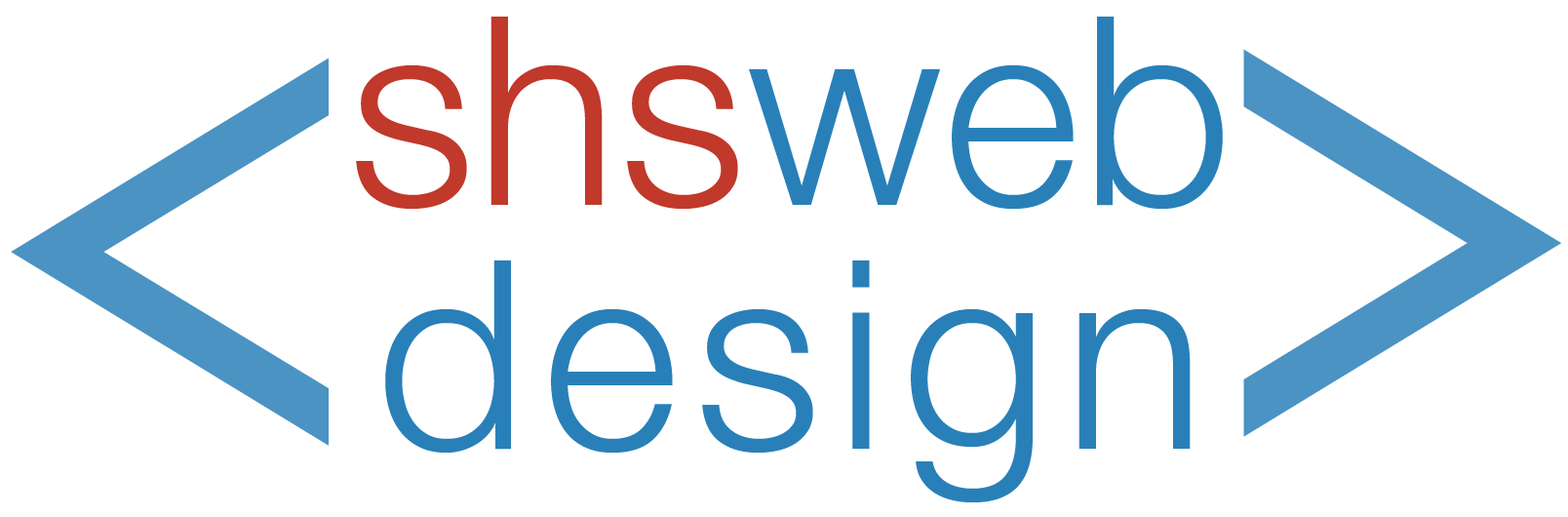
<style>
.page{position:relative;width:1568px;height:517px;background:#ffffff}
.page>*{position:absolute;margin:0}
.t1{font:263.3px/243.8px "HelveticaNeue-Light";letter-spacing:0.06em;color:#2980b9}
.t2{font:263.3px/243.8px "HelveticaNeue-Light";letter-spacing:0.005em;color:#c0392b}
.t3{font:263.3px/243.8px "HelveticaNeue-Light";letter-spacing:0.005em;color:#2980b9}
.t4{font:1263.8px "GeosansLight";letter-spacing:0.12em;color:#4a93c3}
</style>
<div class="page">
<p class="t1" style="left:356px;top:17px;width:867px;height:485px;text-align:center"><span class="t2">shs</span><span class="t3">web<br></span>design</p>
<p class="t4" style="left:1243px;top:49px;width:318px;height:388px">&gt;</p>
<p class="t4" style="left:11px;top:58px;width:318px;height:388px">&lt;</p>
</div>
